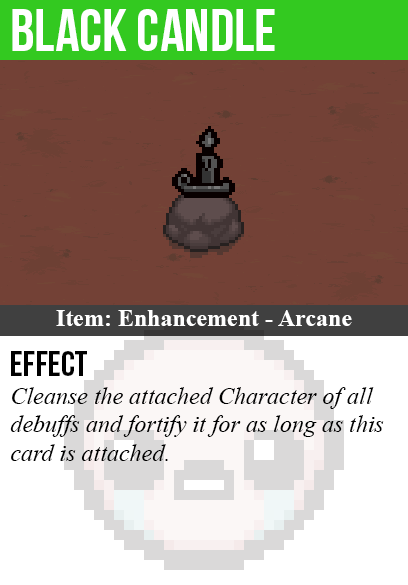
<style>
.page{position:relative;width:408px;height:585px;background:#734136}
.page>*{position:absolute;margin:0}
.t1{font:60px "BebasNeue";color:#ffffff}
.t2{font:24px "TimesNewRomanPS-BoldMT";color:#ffffff}
.t3{font:36px "BebasNeue";color:#000000}
.t4{font:24px "TimesNewRomanPS-ItalicMT";color:#000000}
</style>
<div class="page">
<p class="t1" style="left:12px;top:9px;width:263px;height:42px">black candle</p>
<p class="t2" style="left:56px;top:310px;width:296px;height:16px">Item: Enhancement - Arcane</p>
<p class="t3" style="left:11px;top:351px;width:76px;height:25px">Effect</p>
<p class="t4" style="left:10px;top:387px;width:374px;height:74px">Cleanse the attached Character of all<br>debuffs and fortify it for as long as this<br>card is attached.</p>
</div>
